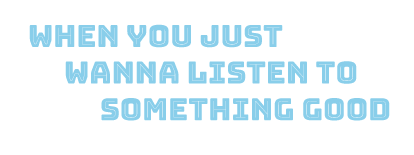
<style>
.page{position:relative;width:414px;height:155px;background:#ffffff}
.page>*{position:absolute;margin:0}
.t1{font:30.6px "BungeeInline-Regular";color:#89ceea}
</style>
<div class="page">
<p class="t1" style="left:29px;top:24px;width:361px;height:97px">when you just<br> wanna listen to<br>  something good</p>
</div>
